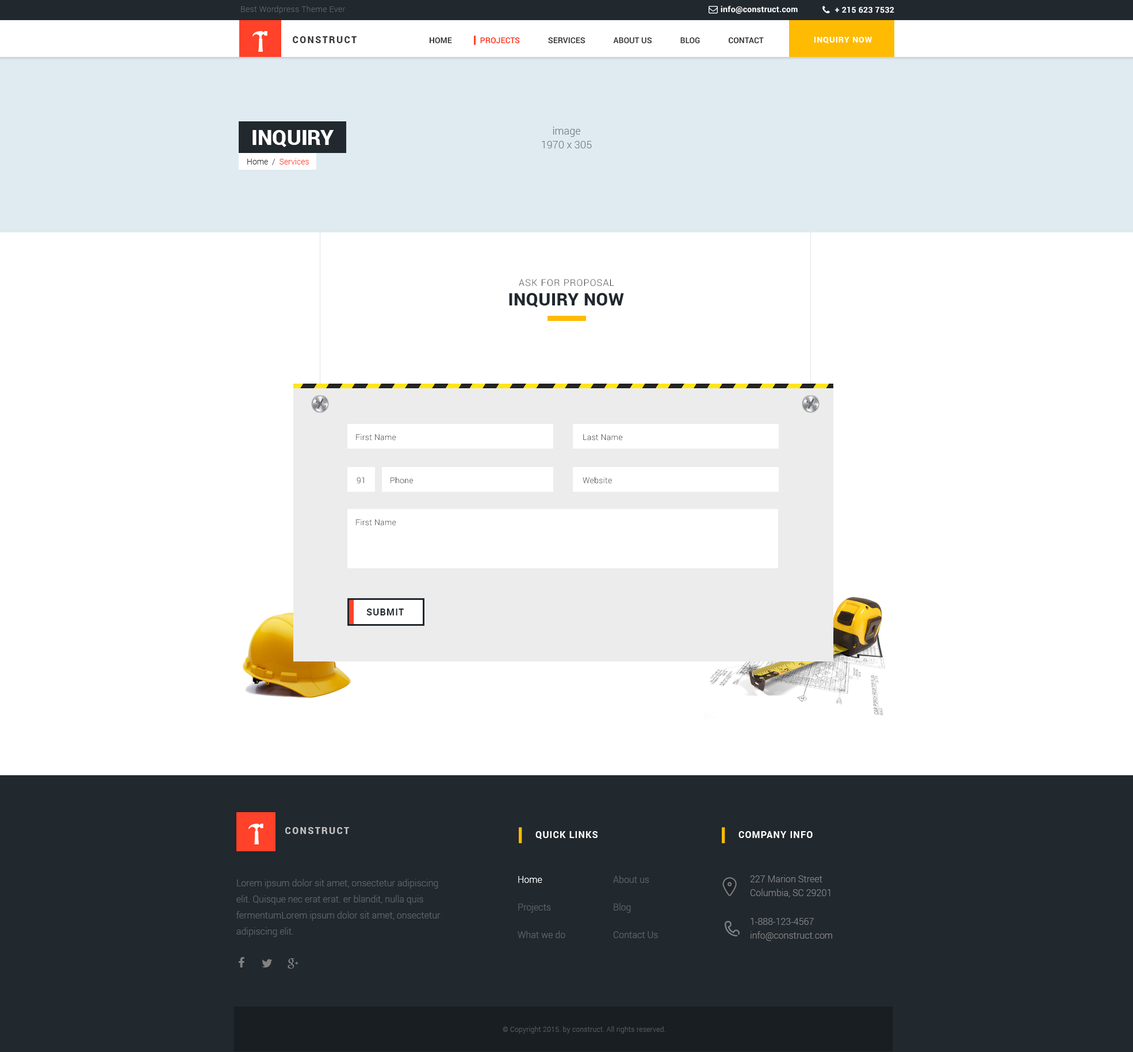
<style>
.page{position:relative;width:1133px;height:1052px;background:#ffffff}
.page>*{position:absolute;margin:0}
.t1{font:8.1px "Roboto-Light";letter-spacing:0.025em;color:#5a5f63}
.t2{font:8.1px "Roboto-Bold";letter-spacing:0.025em;color:#ffffff}
.t3{font:9.2px "Roboto-Black";letter-spacing:0.15em;color:#353537;text-transform:uppercase}
.t4{font:8.1px "Roboto-Bold";color:#353537}
.t5{font:8.1px "Roboto-Bold";color:#ff4229}
.t6{font:8.1px "Roboto-Bold";letter-spacing:0.075em;color:#ffffff;text-transform:uppercase}
.t7{font:20.7px "Roboto-Black";color:#ffffff;text-transform:uppercase}
.t8{font:10.4px/13.8px "Roboto-Light";color:#767d81}
.t9{font:8.1px "Roboto-Light";color:#ff4229}
.t10{font:8.1px "Roboto-Light";color:#21282e}
.t11{font:9.2px "Roboto-Light";letter-spacing:0.075em;color:#21282e;text-transform:uppercase}
.t12{font:17.3px "Roboto-Black";letter-spacing:0.02em;color:#21282e;text-transform:uppercase}
.t13{font:8.1px "Roboto-Light";letter-spacing:0.02em}
.t14{font:8.1px "Roboto-Light";letter-spacing:0.02em;color:#21282e}
.t15{font:9.2px "Roboto-Bold";letter-spacing:0.075em;color:#21282e;text-transform:uppercase}
.t16{font:9.2px "Roboto-Black";letter-spacing:0.15em;color:#c0bfbe;text-transform:uppercase}
.t17{font:9.2px "Roboto-Bold";letter-spacing:0.075em;color:#ffffff;text-transform:uppercase}
.t18{font:9.2px/16.1px "Roboto-Light";color:#5e656a}
.t19{font:9.2px/27.6px "Roboto-Light";color:#5e656a}
.t20{font:9.2px/27.6px "Roboto-Light";color:#ffffff}
.t21{font:9.2px/13.8px "Roboto-Light";color:#828282}
.t22{font:6.9px "Roboto-Light";letter-spacing:0.025em;color:#52595e}
</style>
<div class="page">
<p class="t1" style="left:241px;top:6px;width:105px;height:8px">Best Wordpress Theme Ever</p>
<p class="t2" style="left:721px;top:6px;width:77px;height:8px">info@construct.com</p>
<p class="t2" style="left:835px;top:7px;width:60px;height:6px">+ 215 623 7532</p>
<p class="t3" style="left:293px;top:36px;width:64px;height:7px">Construct</p>
<p class="t4" style="left:430px;top:37px;width:334px;height:7px">HOME              <span class="t5">PROJECTS</span>              SERVICES              ABOUT US              BLOG              CONTACT</p>
<p class="t6" style="left:814px;top:37px;width:58px;height:7px">Inquiry Now</p>
<p class="t7" style="left:253px;top:130px;width:81px;height:17px">Inquiry</p>
<p class="t8" style="left:542px;top:127px;width:50px;height:21px;text-align:center">image<br>1970 x 305</p>
<p class="t9" style="left:247px;top:158px;width:62px;height:7px"><span class="t10">Home  /  </span>Services</p>
<p class="t11" style="left:519px;top:279px;width:95px;height:7px">Ask for Proposal</p>
<p class="t12" style="left:509px;top:293px;width:115px;height:15px">Inquiry Now</p>
<p class="t13" style="left:356px;top:434px;width:40px;height:7px">First Name</p>
<p class="t14" style="left:583px;top:434px;width:39px;height:7px">Last Name</p>
<p class="t13" style="left:357px;top:477px;width:7px;height:7px">91</p>
<p class="t14" style="left:391px;top:477px;width:22px;height:7px">Phone</p>
<p class="t14" style="left:583px;top:477px;width:29px;height:7px">Website</p>
<p class="t13" style="left:356px;top:519px;width:40px;height:7px">First Name</p>
<p class="t15" style="left:366px;top:609px;width:38px;height:7px">Submit</p>
<p class="t16" style="left:285px;top:827px;width:64px;height:7px">Construct</p>
<p class="t17" style="left:536px;top:831px;width:62px;height:8px">Quick Links</p>
<p class="t17" style="left:739px;top:831px;width:74px;height:7px">Company Info</p>
<p class="t18" style="left:236px;top:879px;width:205px;height:58px">Lorem ipsum dolor sit amet, onsectetur adipiscing elit. Quisque nec erat erat. er blandit, nulla quis fermentumLorem ipsum dolor sit amet, onsectetur adipiscing elit.</p>
<p class="t19" style="left:518px;top:876px;width:47px;height:62px"><span class="t20">Home<br></span>Projects<br>What we do</p>
<p class="t19" style="left:613px;top:876px;width:45px;height:62px">About us<br>Blog<br>Contact Us</p>
<p class="t21" style="left:750px;top:875px;width:81px;height:22px">227 Marion Street<br>Columbia, SC 29201</p>
<p class="t21" style="left:751px;top:918px;width:81px;height:23px">1-888-123-4567<br>info@construct.com</p>
<p class="t22" style="left:503px;top:1026px;width:163px;height:8px">© Copyright 2015. by construct. All rights reserved.</p>
</div>
